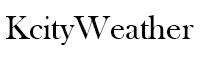
<style>
.page{position:relative;width:200px;height:60px;background:#ffffff}
.page>*{position:absolute;margin:0}
.t1{font:34px "BaskOldFace";color:#000000}
</style>
<div class="page">
<p class="t1" style="left:6px;top:15px;width:188px;height:30px">KcityWeather</p>
</div>
